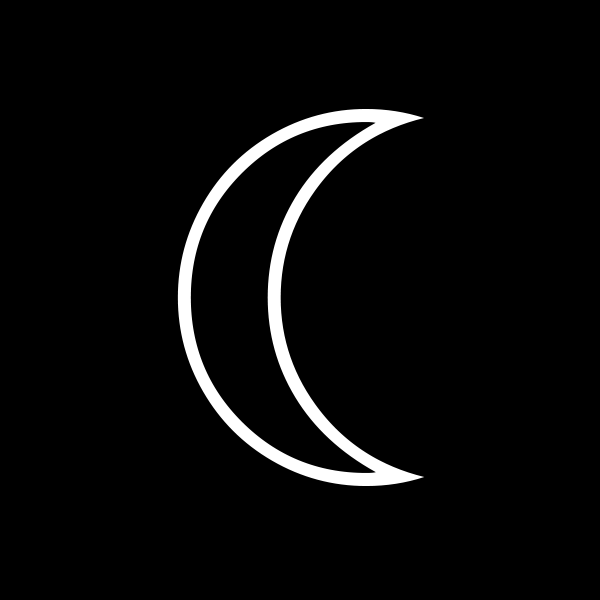
<style>
.page{position:relative;width:600px;height:600px;background:#000000}
.page>*{position:absolute;margin:0}
.t1{font:428.1px "ArialUnicodeMS";color:#ffffff}
</style>
<div class="page">
<p class="t1" style="left:177px;top:109px;width:248px;height:377px">☾</p>
</div>
